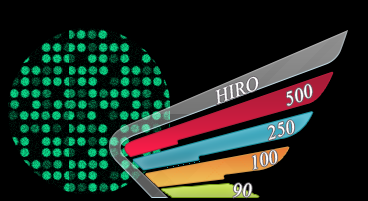
<style>
.page{position:relative;width:368px;height:201px;background:#000000}
.page>*{position:absolute;margin:0}
.t1{font:24px "Vijaya";color:#fefefe}
.t2{font:24px "Vijaya";color:#ffffff}
</style>
<div class="page">
<p class="t1" style="left:215px;top:76px;width:44px;height:29px;rotate:-20deg">HIRO</p>
<p class="t2" style="left:286px;top:84px;width:27px;height:22px;rotate:-20deg">500</p>
<p class="t2" style="left:268px;top:120px;width:27px;height:20px;rotate:-17deg">250</p>
<p class="t2" style="left:252px;top:150px;width:26px;height:20px;rotate:-17deg">100</p>
<p class="t2" style="left:233px;top:183px;width:19px;height:15px;rotate:-4deg">90</p>
</div>
